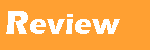
<style>
.page{position:relative;width:150px;height:50px;background:#ffa032}
.page>*{position:absolute;margin:0}
.t1{font:30px "ErasITC-Bold";color:#ffffff}
.t2{font:35px "ErasITC-Bold";color:#ffffff}
</style>
<div class="page">
<p class="t1" style="left:6px;top:11px;width:114px;height:23px"><span class="t2">R</span>eview</p>
</div>
